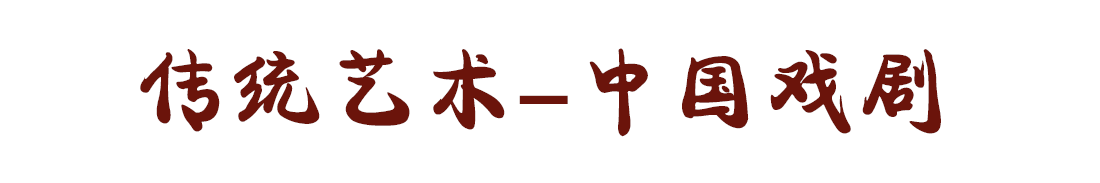
<style>
.page{position:relative;width:1100px;height:183px;background:#ffffff}
.page>*{position:absolute;margin:0}
.t1{font:95px "FZKANGJW--GB1-0";color:#6b140b}
</style>
<div class="page">
<p class="t1" style="left:140px;top:48px;width:801px;height:89px">传统艺术-中国戏剧</p>
</div>
